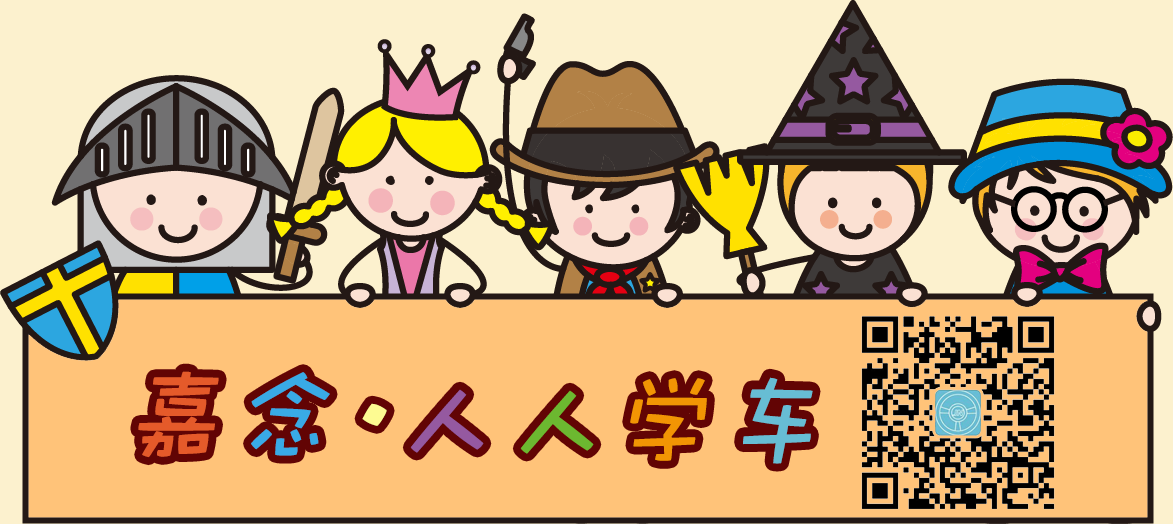
<style>
.page{position:relative;width:1173px;height:524px;background:#ffc379}
.page>*{position:absolute;margin:0}
.t1{font:104.2px "DFPWaWaW5";letter-spacing:0.03em;color:#e55a2a;font-weight:bold;font-style:italic}
.t2{font:104.2px "DFPWaWaW5";letter-spacing:0.03em;color:#39aae6;font-weight:bold;font-style:italic}
.t3{font:104.2px "DFPWaWaW5";letter-spacing:0.03em;font-weight:bold;font-style:italic}
.t4{font:104.2px "DFPWaWaW5";letter-spacing:0.03em;color:#67bdd4;font-weight:bold;font-style:italic}
.t5{font:104.2px "DFPWaWaW5";letter-spacing:0.03em;color:#9559a0;font-weight:bold;font-style:italic}
.t6{font:104.2px "DFPWaWaW5";letter-spacing:0.03em;color:#6cb830;font-weight:bold;font-style:italic}
.t7{font:104.2px "DFPWaWaW5";letter-spacing:0.03em;color:#fdfb92;font-weight:bold;font-style:italic}
</style>
<div class="page">
<p class="t1" style="left:138px;top:371px;width:81px;height:87px">嘉</p>
<p class="t2" style="left:251px;top:372px;width:79px;height:84px">念</p>
<p class="t3" style="left:630px;top:376px;width:182px;height:87px">学车</p>
<p class="t4" style="left:743px;top:377px;width:70px;height:87px">车</p>
<p class="t5" style="left:410px;top:389px;width:74px;height:64px">人</p>
<p class="t6" style="left:520px;top:390px;width:74px;height:64px">人</p>
<p class="t7" style="left:362px;top:403px;width:25px;height:23px">·</p>
</div>
